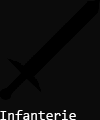
<style>
.page{position:relative;width:100px;height:120px;background:#0b0b0b}
.page>*{position:absolute;margin:0}
.t1{font:14px "Consolas";color:#ffffff}
</style>
<div class="page">
<p class="t1" style="left:0px;top:110px;width:76px;height:10px">Infanterie</p>
</div>
